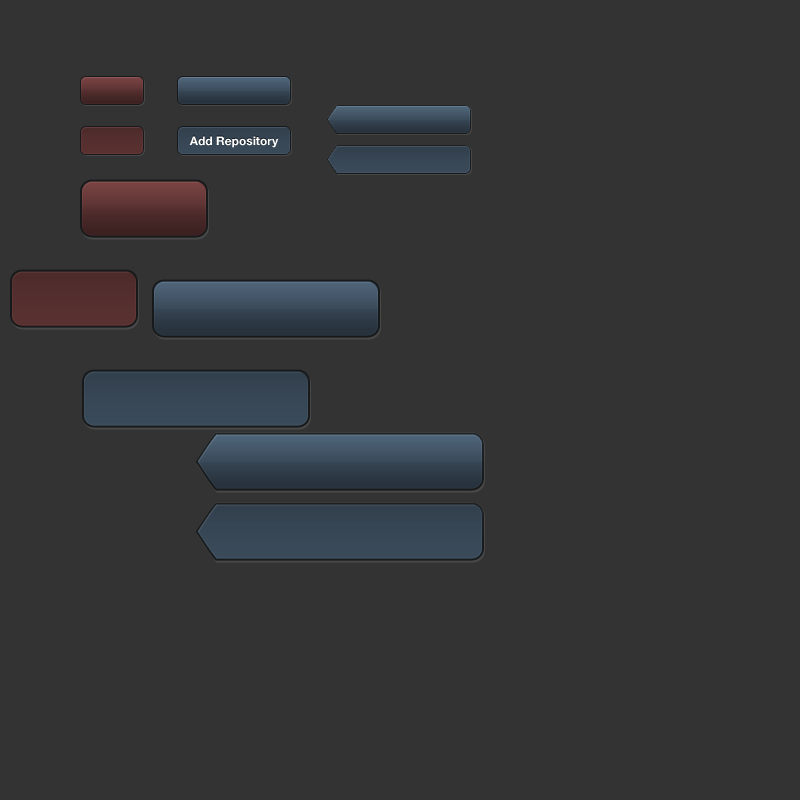
<style>
.page{position:relative;width:800px;height:800px;background:#333333}
.page>*{position:absolute;margin:0}
.t1{font:12px "HelveticaNeue-Bold";color:#ffffff}
</style>
<div class="page">
<p class="t1" style="left:189px;top:136px;width:90px;height:12px">Add Repository</p>
</div>
